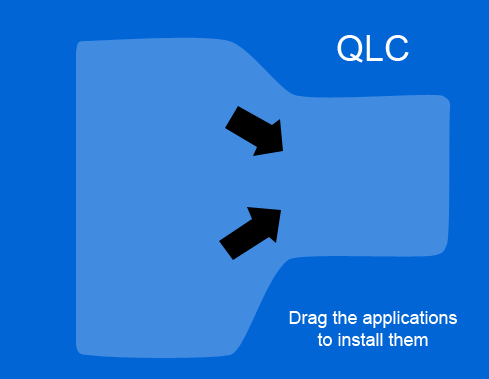
<style>
.page{position:relative;width:489px;height:379px;background:#0165d6}
.page>*{position:absolute;margin:0}
.t1{font:36px "ArialMT";color:#ffffff}
.t2{font:18px "ArialMT";color:#ffffff}
</style>
<div class="page">
<p class="t1" style="left:337px;top:35px;width:72px;height:28px">QLC</p>
<p class="t2" style="left:289px;top:311px;width:168px;height:35px;text-align:center">Drag the applications<br>to install them</p>
</div>
